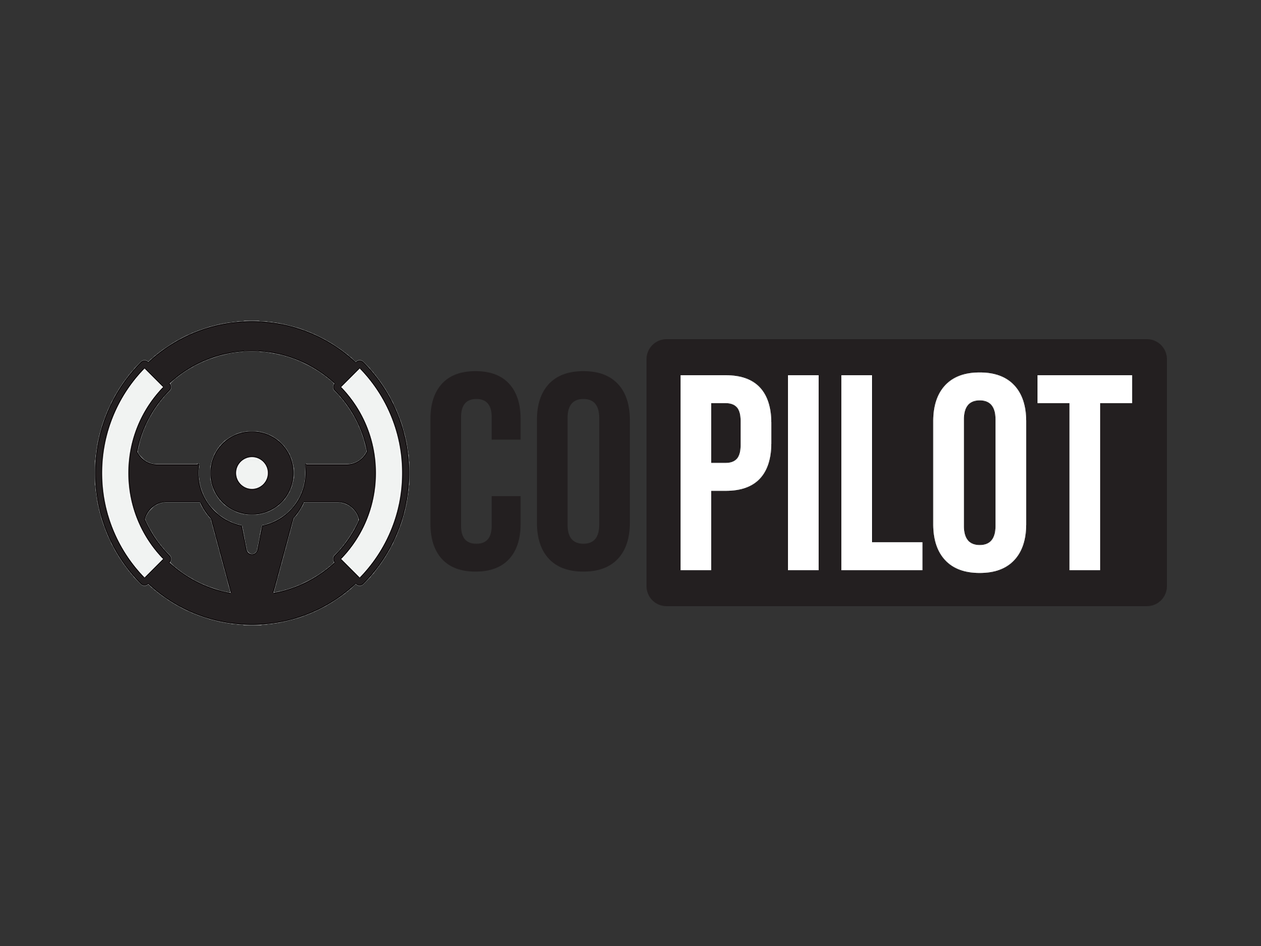
<style>
.page{position:relative;width:1261px;height:946px;background:#333333}
.page>*{position:absolute;margin:0}
.t1{font:278px "BebasNeue-Regular";color:#231f20}
.t2{font:278px "BebasNeue-Regular";color:#ffffff}
</style>
<div class="page">
<p class="t1" style="left:430px;top:370px;width:201px;height:202px">CO</p>
<p class="t2" style="left:681px;top:372px;width:451px;height:201px">PILOT</p>
</div>
